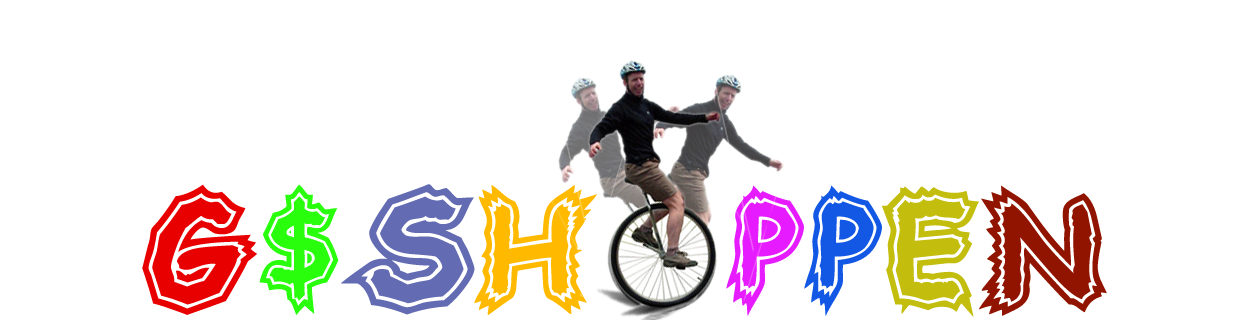
<style>
.page{position:relative;width:1260px;height:320px;background:#ffffff}
.page>*{position:absolute;margin:0}
.t1{font:130px "woodcutterElectric";color:#e80000;text-transform:uppercase}
.t2{font:130px "woodcutterElectric";color:#29ff0c;text-transform:uppercase}
.t3{font:130px "woodcutterElectric";color:#636bb3;text-transform:uppercase}
.t4{font:130px "woodcutterElectric";color:#ffba00;text-transform:uppercase}
.t5{font:130px "woodcutterElectric";color:#e71bff;text-transform:uppercase}
.t6{font:130px "woodcutterElectric";color:#1358e4;text-transform:uppercase}
.t7{font:130px "woodcutterElectric";color:#c3bd0d;text-transform:uppercase}
.t8{font:130px "woodcutterElectric";color:#911400;text-transform:uppercase}
</style>
<div class="page">
<p class="t1" style="left:142px;top:184px;width:965px;height:133px">G<span class="t2">$</span><span class="t3">S</span><span class="t4">H    </span><span class="t5">P</span><span class="t6">P</span><span class="t7">E</span><span class="t8">N</span></p>
</div>
